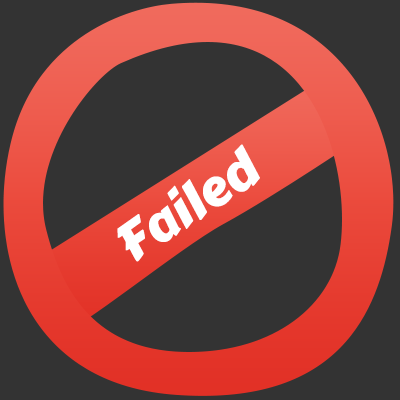
<style>
.page{position:relative;width:400px;height:400px;background:#333333}
.page>*{position:absolute;margin:0}
.t1{font:52px "CarterOne";color:#ffffff}
</style>
<div class="page">
<p class="t1" style="left:117px;top:144px;width:143px;height:118px;rotate:-33deg">Failed</p>
</div>
